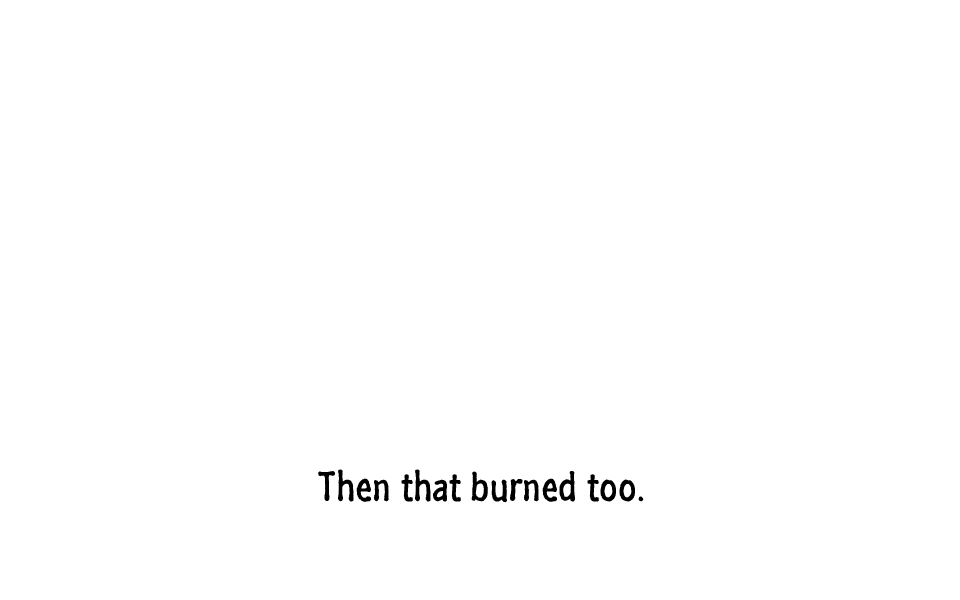
<style>
.page{position:relative;width:960px;height:600px;background:#ffffff}
.page>*{position:absolute;margin:0}
.t1{font:42px "SegoeMarker";color:#000000}
</style>
<div class="page">
<p class="t1" style="left:318px;top:469px;width:326px;height:34px">Then that burned too.</p>
</div>
